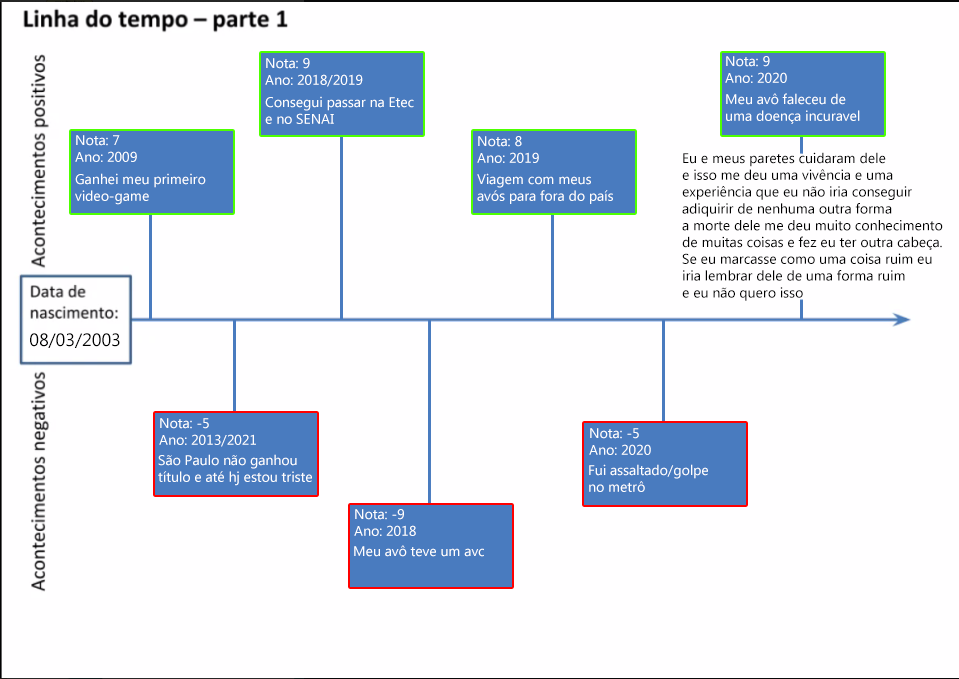
<style>
.page{position:relative;width:959px;height:679px;background:#fffeff}
.page>*{position:absolute;margin:0}
.t1{font:14px "MicrosoftTaiLe";color:#ffffff}
.t2{font:14px "MicrosoftTaiLe";color:#000000}
.t3{font:18px "MicrosoftTaiLe";color:#000000}
</style>
<div class="page">
<p class="t1" style="left:265px;top:58px;width:98px;height:29px">Nota: 9<br>Ano: 2018/2019</p>
<p class="t1" style="left:725px;top:56px;width:62px;height:27px">Nota: 9<br>Ano: 2020</p>
<p class="t1" style="left:265px;top:96px;width:149px;height:28px">Consegui passar na Etec<br>e no SENAI</p>
<p class="t1" style="left:726px;top:93px;width:134px;height:31px">Meu avô faleceu de <br>uma doença incuravel</p>
<p class="t1" style="left:75px;top:135px;width:62px;height:27px">Nota: 7<br>Ano: 2009</p>
<p class="t1" style="left:477px;top:136px;width:62px;height:27px">Nota: 8<br>Ano: 2019</p>
<p class="t2" style="left:682px;top:152px;width:261px;height:149px">Eu e meus paretes cuidaram dele<br>e isso me deu uma vivência e uma<br>experiência que eu não iria conseguir<br>adiquirir de nenhuma outra forma<br>a morte dele me deu muito conhecimento<br>de muitas coisas e fez eu ter outra cabeça.<br>Se eu marcasse como uma coisa ruim eu<br>iria lembrar dele de uma forma ruim <br>e eu não quero isso</p>
<p class="t1" style="left:75px;top:173px;width:131px;height:32px">Ganhei meu primeiro<br>video-game</p>
<p class="t1" style="left:477px;top:173px;width:136px;height:31px">Viagem com meus<br>avós para fora do país</p>
<p class="t3" style="left:30px;top:333px;width:90px;height:15px">08/03/2003</p>
<p class="t1" style="left:159px;top:418px;width:97px;height:29px">Nota: -5<br>Ano: 2013/2021</p>
<p class="t1" style="left:589px;top:428px;width:62px;height:27px">Nota: -5<br>Ano: 2020</p>
<p class="t1" style="left:158px;top:454px;width:154px;height:32px">São Paulo não ganhou <br>título e até hj estou triste</p>
<p class="t1" style="left:589px;top:464px;width:119px;height:28px">Fui assaltado/golpe<br>no metrô</p>
<p class="t1" style="left:354px;top:509px;width:62px;height:27px">Nota: -9<br>Ano: 2018</p>
<p class="t1" style="left:354px;top:545px;width:130px;height:12px">Meu avô teve um avc</p>
</div>
